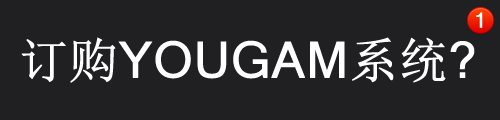
<style>
.page{position:relative;width:500px;height:120px;background:#202023}
.page>*{position:absolute;margin:0}
.t1{font:20px "Mangal";color:#ffffff;font-weight:bold}
.t2{font:48.3px "Mangal";color:#ffffff;font-weight:bold}
.t3{font:48.3px "SimSun";color:#ffffff;font-weight:bold}
</style>
<div class="page">
<p class="t1" style="left:476px;top:12px;width:7px;height:16px">1</p>
<p class="t2" style="left:21px;top:37px;width:454px;height:46px"><span class="t3">订购</span>YOUGAM<span class="t3">系统</span>?</p>
</div>
